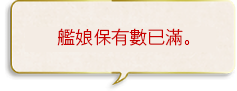
<style>
.page{position:relative;width:237px;height:91px;background:#f4ece4}
.page>*{position:absolute;margin:0}
.t1{font:18px "GothicMB101Pr6N-Light";color:#c90000}
</style>
<div class="page">
<p class="t1" style="left:57px;top:28px;width:133px;height:18px">艦娘保有數已滿。</p>
</div>
